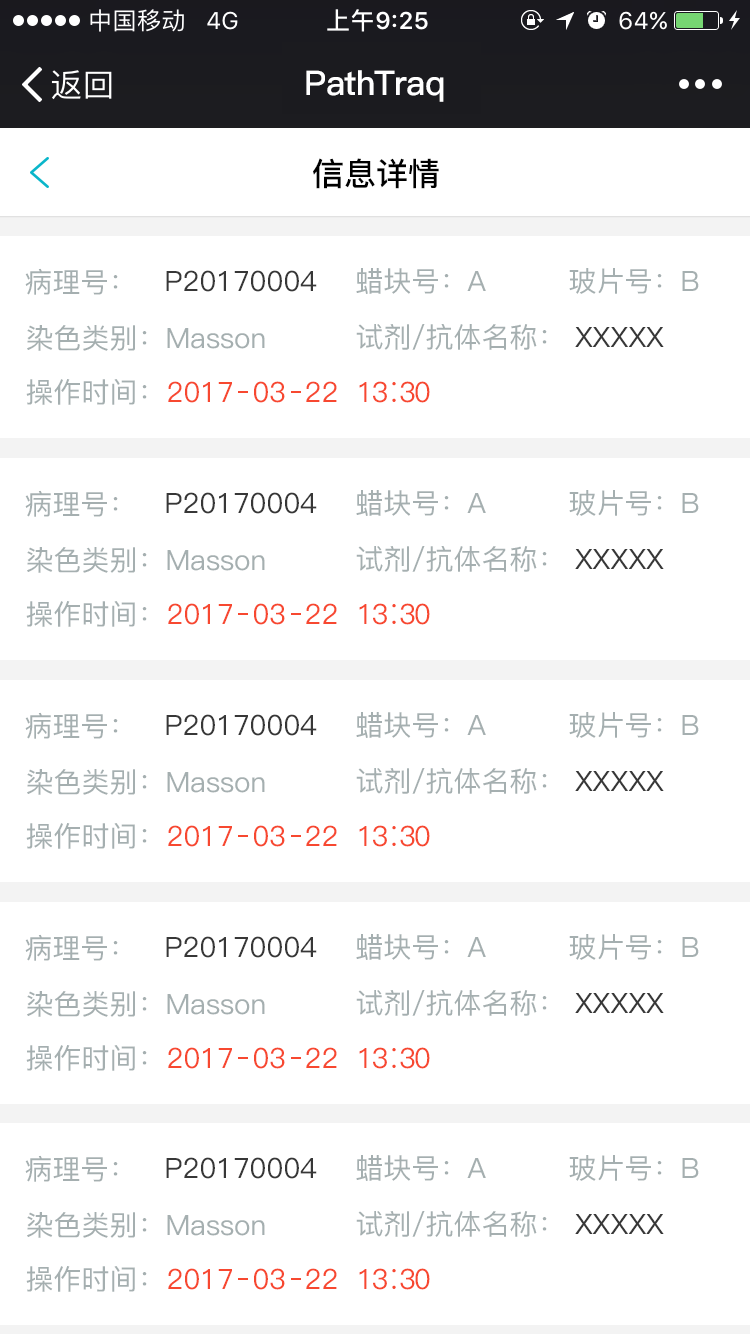
<style>
.page{position:relative;width:750px;height:1334px;background:#ffffff}
.page>*{position:absolute;margin:0}
.t1{font:24px "PingFang-SC-Medium";letter-spacing:0.02em;color:#ffffff}
.t2{font:34px "PingFang-SC-Bold";letter-spacing:-0.025em;color:#ffffff}
.t3{font:32px "PingFang-SC-Bold";color:#000000}
.t4{font:28px "PingFang-SC-Medium";color:#a5afb0}
.t5{font:28px "PingFang-SC-Medium";color:#373737}
.t6{font:28px "PingFang-SC-Medium";color:#f74830}
.t7{font:28px "PingFang-SC-Medium";letter-spacing:-0.06em;color:#f74830}
</style>
<div class="page">
<p class="t1" style="left:90px;top:9px;width:93px;height:23px">中国移动</p>
<p class="t2" style="left:306px;top:70px;width:138px;height:32px">PathTraq</p>
<p class="t3" style="left:313px;top:158px;width:126px;height:31px">信息详情</p>
<p class="t4" style="left:25px;top:268px;width:93px;height:27px">病理号：</p>
<p class="t5" style="left:166px;top:270px;width:151px;height:22px">P20170004</p>
<p class="t4" style="left:356px;top:268px;width:130px;height:26px">蜡块号：A</p>
<p class="t4" style="left:569px;top:268px;width:130px;height:26px">玻片号：B</p>
<p class="t4" style="left:27px;top:325px;width:238px;height:26px">染色类别：Masson</p>
<p class="t4" style="left:356px;top:324px;width:308px;height:26px">试剂/抗体名称： <span class="t5">XXXXX</span></p>
<p class="t4" style="left:26px;top:379px;width:121px;height:26px">操作时间：</p>
<p class="t6" style="left:168px;top:381px;width:169px;height:22px">2017  03  22</p>
<p class="t7" style="left:359px;top:381px;width:71px;height:22px">13∶30</p>
<p class="t4" style="left:25px;top:490px;width:93px;height:27px">病理号：</p>
<p class="t5" style="left:166px;top:492px;width:151px;height:22px">P20170004</p>
<p class="t4" style="left:356px;top:490px;width:130px;height:26px">蜡块号：A</p>
<p class="t4" style="left:569px;top:490px;width:130px;height:26px">玻片号：B</p>
<p class="t4" style="left:27px;top:547px;width:238px;height:26px">染色类别：Masson</p>
<p class="t4" style="left:356px;top:546px;width:308px;height:26px">试剂/抗体名称： <span class="t5">XXXXX</span></p>
<p class="t4" style="left:26px;top:601px;width:121px;height:26px">操作时间：</p>
<p class="t6" style="left:168px;top:603px;width:169px;height:22px">2017  03  22</p>
<p class="t7" style="left:359px;top:603px;width:71px;height:22px">13∶30</p>
<p class="t4" style="left:25px;top:712px;width:93px;height:27px">病理号：</p>
<p class="t4" style="left:356px;top:712px;width:130px;height:26px">蜡块号：A</p>
<p class="t4" style="left:569px;top:712px;width:130px;height:26px">玻片号：B</p>
<p class="t5" style="left:166px;top:714px;width:151px;height:22px">P20170004</p>
<p class="t4" style="left:27px;top:769px;width:238px;height:26px">染色类别：Masson</p>
<p class="t4" style="left:356px;top:768px;width:308px;height:26px">试剂/抗体名称： <span class="t5">XXXXX</span></p>
<p class="t4" style="left:26px;top:823px;width:121px;height:26px">操作时间：</p>
<p class="t6" style="left:168px;top:825px;width:169px;height:22px">2017  03  22</p>
<p class="t7" style="left:359px;top:825px;width:71px;height:22px">13∶30</p>
<p class="t4" style="left:25px;top:934px;width:93px;height:27px">病理号：</p>
<p class="t5" style="left:166px;top:936px;width:151px;height:22px">P20170004</p>
<p class="t4" style="left:356px;top:934px;width:130px;height:26px">蜡块号：A</p>
<p class="t4" style="left:569px;top:934px;width:130px;height:26px">玻片号：B</p>
<p class="t4" style="left:356px;top:990px;width:308px;height:26px">试剂/抗体名称： <span class="t5">XXXXX</span></p>
<p class="t4" style="left:27px;top:991px;width:238px;height:26px">染色类别：Masson</p>
<p class="t4" style="left:26px;top:1045px;width:121px;height:26px">操作时间：</p>
<p class="t6" style="left:168px;top:1047px;width:169px;height:22px">2017  03  22</p>
<p class="t7" style="left:359px;top:1047px;width:71px;height:22px">13∶30</p>
<p class="t4" style="left:25px;top:1155px;width:93px;height:27px">病理号：</p>
<p class="t5" style="left:166px;top:1157px;width:151px;height:22px">P20170004</p>
<p class="t4" style="left:356px;top:1155px;width:130px;height:26px">蜡块号：A</p>
<p class="t4" style="left:569px;top:1155px;width:130px;height:26px">玻片号：B</p>
<p class="t4" style="left:27px;top:1212px;width:238px;height:26px">染色类别：Masson</p>
<p class="t4" style="left:356px;top:1211px;width:308px;height:26px">试剂/抗体名称： <span class="t5">XXXXX</span></p>
<p class="t4" style="left:26px;top:1266px;width:121px;height:26px">操作时间：</p>
<p class="t6" style="left:168px;top:1268px;width:169px;height:22px">2017  03  22</p>
<p class="t7" style="left:359px;top:1268px;width:71px;height:22px">13∶30</p>
</div>
